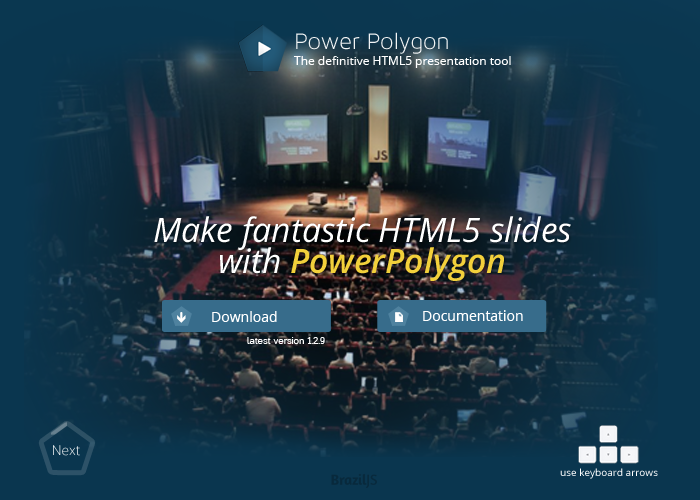
<style>
.page{position:relative;width:700px;height:500px}
.page>*{position:absolute;margin:0}
.t1{font:24px "MavenProLight300-Regular";color:#ffffff}
.t2{font:12px "OpenSans";color:#ffffff}
.t3{font:33.7px/30.6px "OpenSans-Italic";color:#ffffff}
.t4{font:33.7px/30.6px "OpenSans-SemiboldItalic";color:#f2d03b}
.t5{font:14px "OpenSans";color:#ffffff}
.t6{font:10px "Casper";color:#ffffff}
.t7{font:13.6px "OpenSans-Light"}
.t8{font:10px "OpenSans";color:#ffffff}
</style>
<div class="page">
<p class="t1" style="left:296px;top:32px;width:152px;height:22px">Power Polygon</p>
<p class="t2" style="left:294px;top:56px;width:217px;height:12px">The definitive HTML5 presentation tool</p>
<p class="t3" style="left:154px;top:216px;width:417px;height:65px;text-align:center">Make fantastic HTML5 slides<br>with <span class="t4">PowerPolygon</span></p>
<p class="t5" style="left:212px;top:311px;width:65px;height:11px">Download</p>
<p class="t5" style="left:423px;top:310px;width:100px;height:11px">Documentation</p>
<p class="t6" style="left:247px;top:337px;width:78px;height:7px">latest version 1.2.9</p>
<p class="t7" style="left:53px;top:445px;width:27px;height:11px">Next</p>
<p class="t8" style="left:560px;top:468px;width:98px;height:11px">use keyboard arrows</p>
</div>
